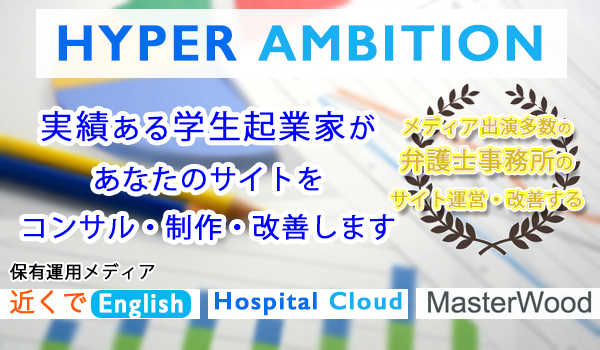
<style>
.page{position:relative;width:600px;height:350px}
.page>*{position:absolute;margin:0}
.t1{font:51px "GillSans-SemiBold";letter-spacing:0.05em;color:#18aff3;font-weight:bold}
.t2{font:51px "GillSans-SemiBold";letter-spacing:0.05em;color:#056ded;font-weight:bold}
.t3{font:26.9px "KozGoPr6N-Regular";letter-spacing:0.05em;color:#0000ff;font-weight:bold}
.t4{font:32.1px "KozGoPr6N-Regular";letter-spacing:0.09em;color:#0000ff;font-weight:bold}
.t5{font:26.9px "KozGoPr6N-Regular";letter-spacing:0.09em;color:#0000ff;font-weight:bold}
.t6{font:32.1px "KozGoPr6N-Regular";letter-spacing:0.07em;color:#0000ff;font-weight:bold}
.t7{font:18px "KozGoPr6N-Regular";letter-spacing:0.05em;color:#dab91f;font-weight:bold}
.t8{font:13px "KozGoPr6N-Regular";letter-spacing:0.05em;color:#dab91f;font-weight:bold}
.t9{font:24px "KozGoPr6N-Regular";letter-spacing:0.05em;color:#dab91f;font-weight:bold}
.t10{font:17px "KozGoPr6N-Regular";letter-spacing:0.05em;color:#dab91f;font-weight:bold}
.t11{font:17px "KozGoPr6N-Regular";letter-spacing:0.05em;color:#040404;font-weight:bold}
</style>
<div class="page">
<p class="t1" style="left:58px;top:24px;width:484px;height:38px"><span class="t2">HYPER </span>AMBITION</p>
<p class="t3" style="left:24px;top:110px;width:371px;height:131px;text-align:center"><span class="t4">実績</span><span class="t5">ある</span><span class="t6">学生起業家</span>が<br>あなたのサイトを<br>コンサル・制作・改善します</p>
<p class="t7" style="left:391px;top:117px;width:191px;height:91px;text-align:center">メディア出演多数<span class="t8">の<br></span><span class="t9">弁護士事務所</span><span class="t10">の<br></span>サイト運営・改善する</p>
<p class="t11" style="left:10px;top:263px;width:145px;height:17px">保有運用メディア</p>
</div>
